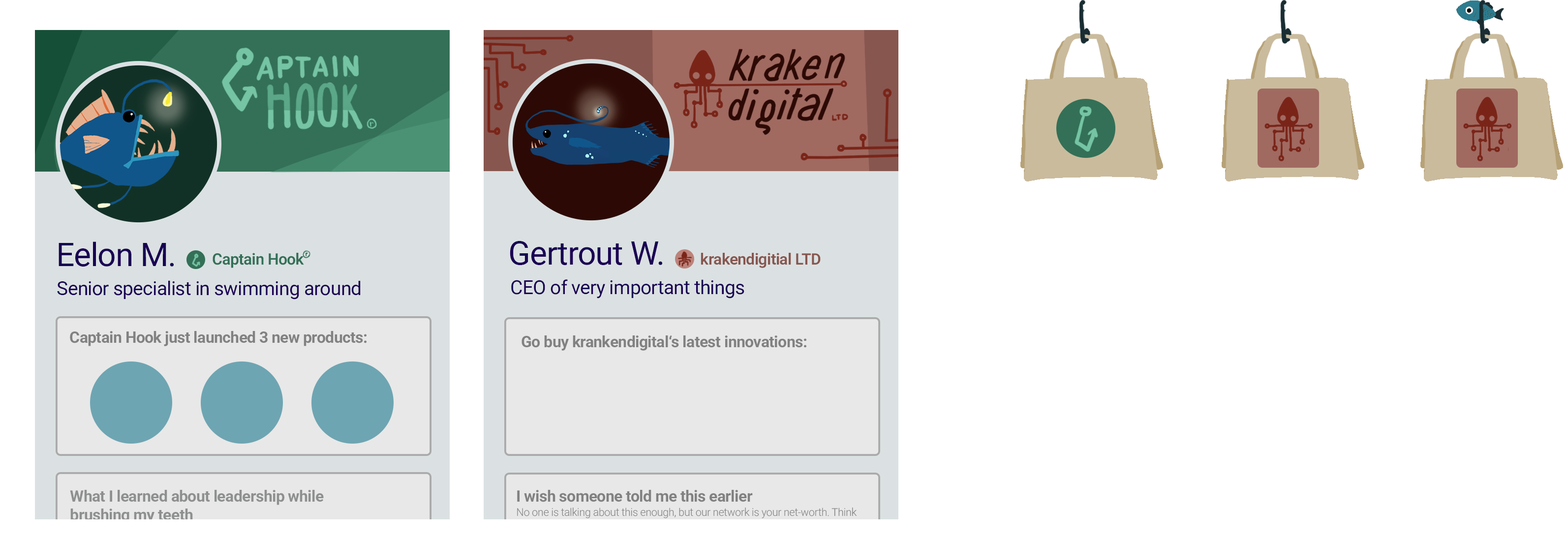
<style>
.page{position:relative;width:1568px;height:540px;background:#ffffff}
.page>*{position:absolute;margin:0}
.t1{font:32.5px "Roboto-Regular";letter-spacing:-0.02em;color:#190053}
.t2{font:15.7px "Roboto-SemiBold";letter-spacing:-0.02em;color:#337057}
.t3{font:6.6px "Roboto-Regular";letter-spacing:-0.02em;color:#337057}
.t4{font:15.7px "Roboto-SemiBold";letter-spacing:-0.02em;color:#87564f}
.t5{font:19.2px "Roboto-Regular";letter-spacing:-0.02em;color:#190053}
.t6{font:15.7px "Roboto-Bold";letter-spacing:-0.02em;color:#818181}
.t7{font:15.7px "Roboto-Bold";letter-spacing:-0.02em;color:#8e8f8f}
.t8{font:10.7px "Roboto-Light";letter-spacing:-0.02em;color:#818181}
</style>
<div class="page">
<p class="t1" style="left:59px;top:242px;width:115px;height:25px">Eelon M.</p>
<p class="t1" style="left:510px;top:241px;width:152px;height:24px">Gertrout W.</p>
<p class="t2" style="left:213px;top:253px;width:91px;height:15px">Captain Hook</p>
<p class="t3" style="left:306px;top:252px;width:1px;height:5px">r</p>
<p class="t4" style="left:701px;top:253px;width:120px;height:15px">krakendigitial LTD</p>
<p class="t5" style="left:57px;top:280px;width:304px;height:20px">Senior specialist in swimming around</p>
<p class="t5" style="left:511px;top:279px;width:233px;height:20px">CEO of very important things</p>
<p class="t6" style="left:70px;top:331px;width:297px;height:15px">Captain Hook just launched 3 new products:</p>
<p class="t6" style="left:522px;top:336px;width:284px;height:15px">Go buy krankendigital‘s latest innovations:</p>
<p class="t7" style="left:70px;top:490px;width:254px;height:34px">What I learned about leadership while <br>brushing my teeth</p>
<p class="t6" style="left:517px;top:490px;width:236px;height:12px">I wish someone told me this earlier</p>
<p class="t8" style="left:517px;top:508px;width:340px;height:11px">No one is talking about this enough, but our network is your net-worth. Think</p>
</div>
